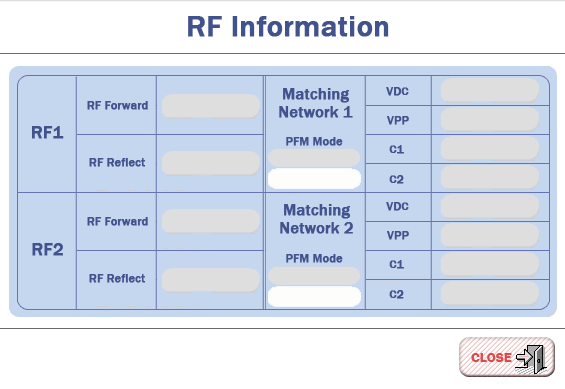
<style>
.page{position:relative;width:565px;height:389px;background:#c5d6ef}
.page>*{position:absolute;margin:0}
.t1{font:30px "FranklinGothic-Medium";color:#42528c;font-weight:bold}
.t2{font:16px/18px "FranklinGothic-Medium";color:#42528c;font-weight:bold}
.t3{font:12px "FranklinGothic-Medium";color:#42528c;font-weight:bold}
.t4{font:18px "FranklinGothic-Medium";color:#42528c;font-weight:bold}
</style>
<div class="page">
<p class="t1" style="left:188px;top:16px;width:201px;height:21px">RF Information</p>
<p class="t2" style="left:279px;top:88px;width:74px;height:30px;text-align:center">Matching<br>Network 1</p>
<p class="t3" style="left:386px;top:87px;width:23px;height:9px">VDC</p>
<p class="t3" style="left:87px;top:101px;width:61px;height:9px">RF Forward</p>
<p class="t4" style="left:32px;top:126px;width:32px;height:13px">RF1</p>
<p class="t3" style="left:387px;top:116px;width:22px;height:9px">VPP</p>
<p class="t3" style="left:286px;top:137px;width:57px;height:9px">PFM Mode</p>
<p class="t3" style="left:389px;top:145px;width:15px;height:9px">C1</p>
<p class="t3" style="left:89px;top:158px;width:57px;height:9px">RF Reflect</p>
<p class="t3" style="left:389px;top:175px;width:15px;height:9px">C2</p>
<p class="t2" style="left:280px;top:204px;width:73px;height:30px;text-align:center">Matching<br>Network 2</p>
<p class="t3" style="left:386px;top:202px;width:23px;height:9px">VDC</p>
<p class="t3" style="left:87px;top:217px;width:61px;height:9px">RF Forward</p>
<p class="t3" style="left:387px;top:231px;width:22px;height:9px">VPP</p>
<p class="t4" style="left:32px;top:243px;width:31px;height:13px">RF2</p>
<p class="t3" style="left:286px;top:254px;width:57px;height:9px">PFM Mode</p>
<p class="t3" style="left:389px;top:260px;width:15px;height:9px">C1</p>
<p class="t3" style="left:89px;top:274px;width:57px;height:9px">RF Reflect</p>
<p class="t3" style="left:389px;top:290px;width:15px;height:9px">C2</p>
</div>
